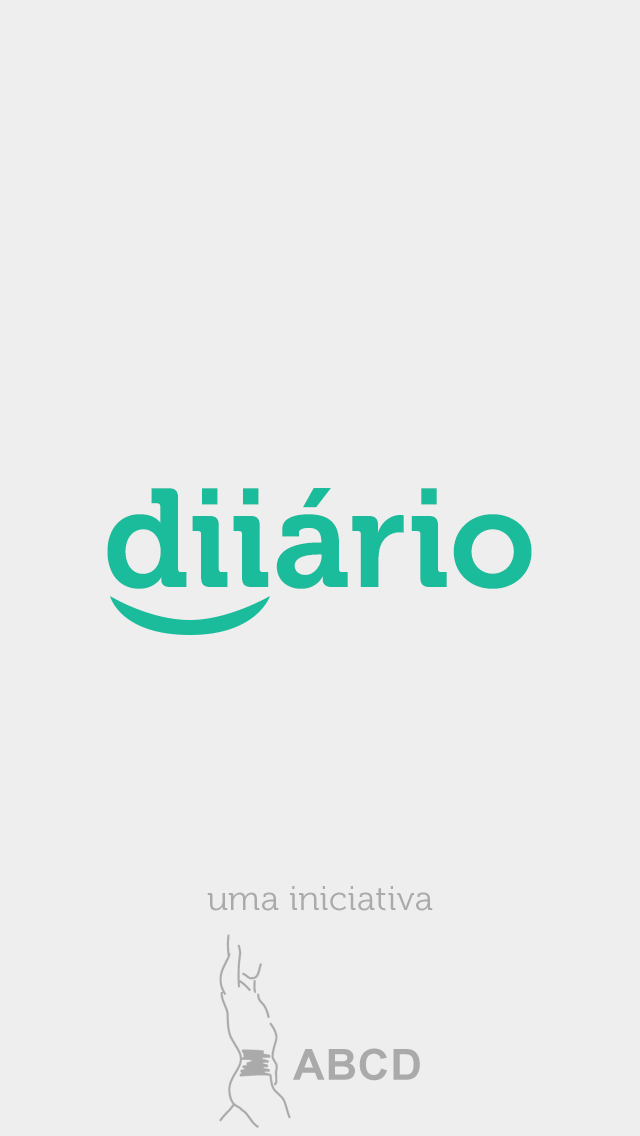
<style>
.page{position:relative;width:640px;height:1136px;background:#eeeeee}
.page>*{position:absolute;margin:0}
.t1{font:139px "Museo700-Regular";letter-spacing:0.02em;color:#1abc9c}
.t2{font:34px "Museo300-Regular";letter-spacing:0.02em;color:#aaaaaa}
.t3{font:43px "Arial-BoldMT";letter-spacing:0.02em;color:#aaaaaa}
</style>
<div class="page">
<p class="t1" style="left:107px;top:488px;width:425px;height:101px">diiário</p>
<p class="t2" style="left:207px;top:886px;width:226px;height:25px">uma iniciativa</p>
<p class="t3" style="left:293px;top:1048px;width:127px;height:33px">ABCD</p>
</div>
